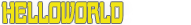
<style>
.page{position:relative;width:191px;height:25px;background:#ffffff}
.page>*{position:absolute;margin:0}
.t1{font:29.2px "UTM-Omni";color:#f2e513;scale:0.25 1}
</style>
<div class="page">
<p class="t1" style="left:2px;top:2px;width:121px;height:21px">HELLOWORLD</p>
</div>
